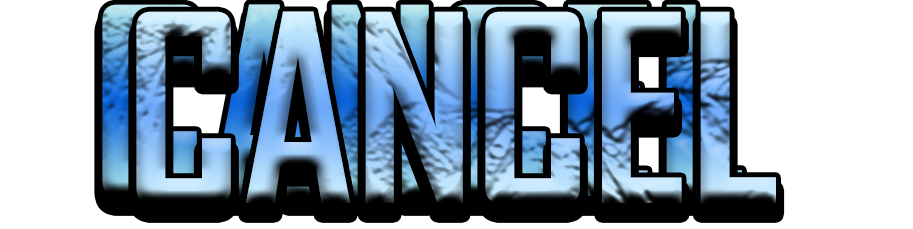
<style>
.page{position:relative;width:913px;height:229px;background:#ffffff}
.page>*{position:absolute;margin:0}
.t1{font:250px "AgencyFB-Bold"}
</style>
<div class="page">
<p class="t1" style="left:136px;top:11px;width:640px;height:192px">CANCEL</p>
</div>
